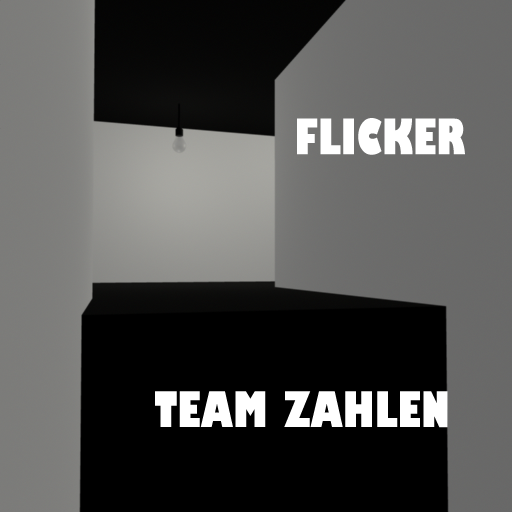
<style>
.page{position:relative;width:512px;height:512px;background:#000000}
.page>*{position:absolute;margin:0}
.t1{font:48px "GillSans-UltraBoldCondensed";color:#ffffff}
</style>
<div class="page">
<p class="t1" style="left:297px;top:118px;width:168px;height:37px">FLICKER</p>
<p class="t1" style="left:155px;top:391px;width:293px;height:37px">TEAM ZAHLEN</p>
</div>
